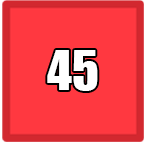
<style>
.page{position:relative;width:144px;height:142px;background:#ff3840}
.page>*{position:absolute;margin:0}
.t1{font:50px "Impact";color:#ffffff}
</style>
<div class="page">
<p class="t1" style="left:47px;top:50px;width:51px;height:41px">45</p>
</div>
